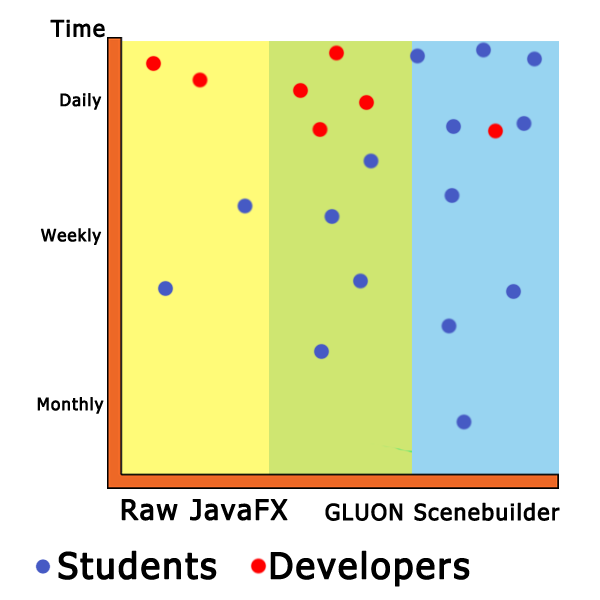
<style>
.page{position:relative;width:600px;height:600px;background:#ffffff}
.page>*{position:absolute;margin:0}
.t1{font:22.4px "Tahoma";letter-spacing:0.05em;color:#000000;font-weight:bold}
.t2{font:16.8px "Tahoma";letter-spacing:0.05em;color:#000000;font-weight:bold}
.t3{font:28px "Tahoma";letter-spacing:0.05em;color:#000000;font-weight:bold}
.t4{font:36px "Tahoma";letter-spacing:0.05em;color:#000000;font-weight:bold}
</style>
<div class="page">
<p class="t1" style="left:50px;top:19px;width:55px;height:19px">Time</p>
<p class="t2" style="left:60px;top:93px;width:42px;height:17px">Daily</p>
<p class="t2" style="left:40px;top:228px;width:62px;height:17px">Weekly</p>
<p class="t2" style="left:37px;top:397px;width:67px;height:17px">Monthly</p>
<p class="t3" style="left:121px;top:499px;width:167px;height:22px">Raw JavaFX</p>
<p class="t1" style="left:325px;top:502px;width:235px;height:19px">GLUON Scenebuilder</p>
<p class="t4" style="left:58px;top:550px;width:159px;height:30px">Students</p>
<p class="t4" style="left:270px;top:550px;width:200px;height:37px">Developers</p>
</div>
